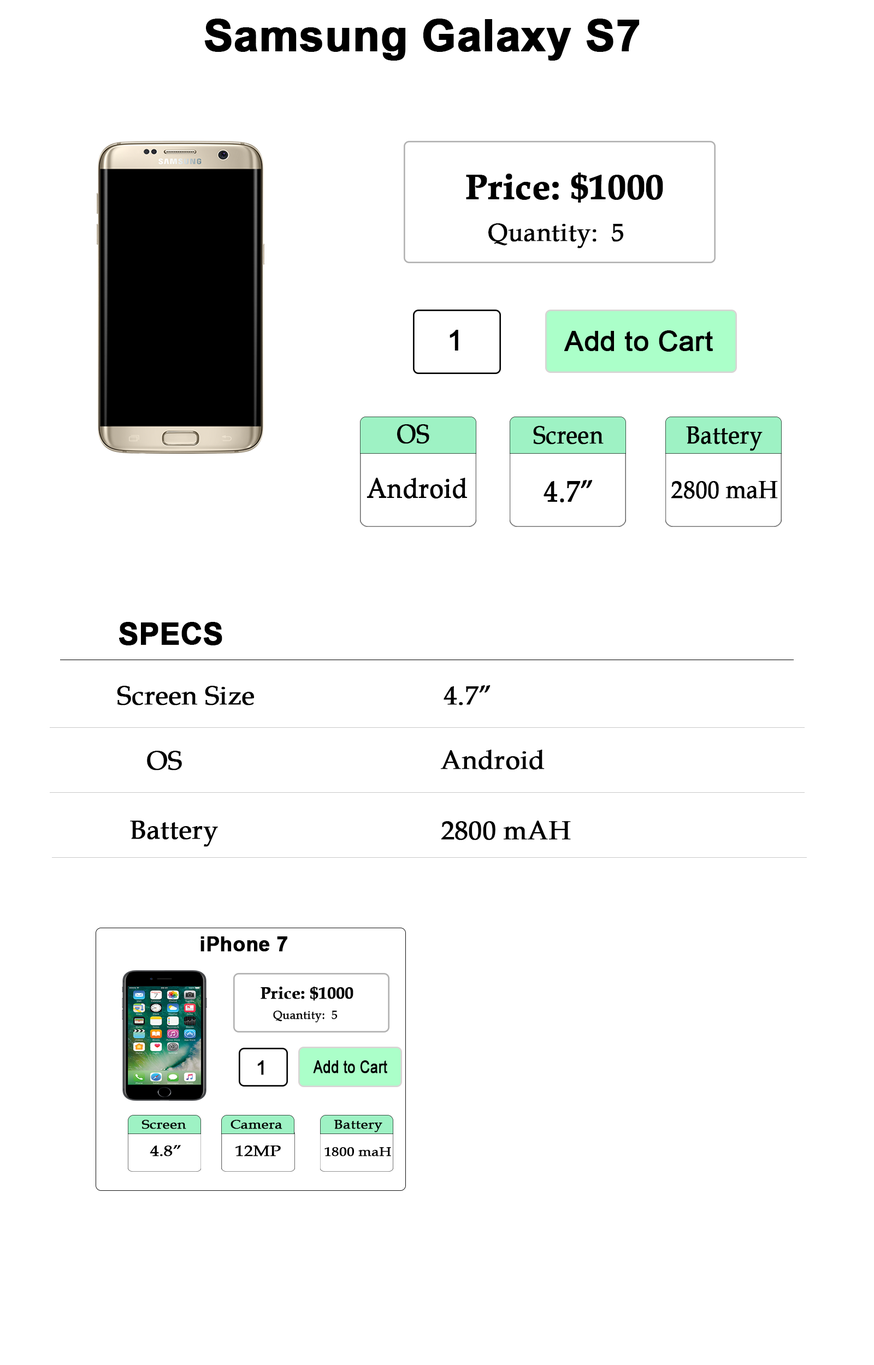
<style>
.page{position:relative;width:874px;height:1365px;background:#ffffff}
.page>*{position:absolute;margin:0}
.t1{font:43.7px "Arial-BoldMT";color:#000000;font-weight:bold}
.t2{font:35.5px "BookAntiqua-Bold";color:#000000;font-weight:bold}
.t3{font:24.6px "BookAntiqua";color:#000000;font-weight:bold}
.t4{font:28.4px "ArialMT";color:#000000;font-weight:bold}
.t5{font:27.3px "ArialMT";color:#000000;font-weight:bold}
.t6{font:26.2px "BookAntiqua";color:#000000;font-weight:bold;scale:0.92 1}
.t7{font:24.7px "BookAntiqua";color:#000000;font-weight:bold;scale:0.92 1}
.t8{font:27.4px "BookAntiqua";color:#000000;font-weight:bold;scale:0.92 1}
.t9{font:29.6px "BookAntiqua";color:#000000;font-weight:bold;scale:0.92 1}
.t10{font:30px "Arial-BoldMT";color:#000000;font-weight:bold}
.t11{font:26.2px "BookAntiqua";color:#000000;font-weight:bold}
.t12{font:20px "Arial-BoldMT";color:#000000;font-weight:bold}
.t13{font:16.7px "BookAntiqua-Bold";color:#000000;font-weight:bold}
.t14{font:12px "BookAntiqua";color:#000000;font-weight:bold}
.t15{font:19.7px "ArialMT";color:#000000;font-weight:bold}
.t16{font:17.5px "ArialMT";color:#000000;font-weight:bold;scale:0.79 1}
.t17{font:12.7px "BookAntiqua";color:#000000;font-weight:bold;scale:1.13 1}
.t18{font:15.3px "BookAntiqua";color:#000000;font-weight:bold;scale:1.13 1}
</style>
<div class="page">
<p class="t1" style="left:204px;top:19px;width:435px;height:42px">Samsung Galaxy S7</p>
<p class="t2" style="left:466px;top:173px;width:197px;height:30px">Price: $1000</p>
<p class="t3" style="left:488px;top:223px;width:135px;height:25px">Quantity:  5</p>
<p class="t4" style="left:449px;top:330px;width:9px;height:21px">1</p>
<p class="t5" style="left:564px;top:330px;width:149px;height:22px">Add to Cart</p>
<p class="t6" style="left:397px;top:424px;width:32px;height:20px">OS</p>
<p class="t7" style="left:533px;top:426px;width:70px;height:18px">Screen</p>
<p class="t7" style="left:686px;top:426px;width:76px;height:25px">Battery</p>
<p class="t8" style="left:366px;top:478px;width:101px;height:20px">Android</p>
<p class="t9" style="left:543px;top:480px;width:49px;height:22px">4.7”</p>
<p class="t7" style="left:670px;top:481px;width:107px;height:18px">2800 maH</p>
<p class="t10" style="left:119px;top:622px;width:103px;height:23px">SPECS</p>
<p class="t11" style="left:117px;top:685px;width:373px;height:20px">Screen Size                          4.7”</p>
<p class="t11" style="left:440px;top:750px;width:104px;height:20px">Android</p>
<p class="t11" style="left:147px;top:751px;width:35px;height:19px">OS</p>
<p class="t11" style="left:130px;top:821px;width:88px;height:26px">Battery</p>
<p class="t11" style="left:441px;top:821px;width:130px;height:19px">2800 mAH</p>
<p class="t12" style="left:200px;top:936px;width:87px;height:16px">iPhone 7</p>
<p class="t13" style="left:260px;top:987px;width:93px;height:14px">Price: $1000</p>
<p class="t14" style="left:273px;top:1011px;width:64px;height:12px">Quantity:  5</p>
<p class="t15" style="left:257px;top:1060px;width:7px;height:15px">1</p>
<p class="t16" style="left:313px;top:1060px;width:74px;height:13px">Add to Cart</p>
<p class="t17" style="left:141px;top:1120px;width:45px;height:9px">Screen</p>
<p class="t17" style="left:230px;top:1120px;width:52px;height:9px">Camera</p>
<p class="t17" style="left:334px;top:1120px;width:48px;height:12px">Battery</p>
<p class="t18" style="left:150px;top:1145px;width:31px;height:11px">4.8”</p>
<p class="t18" style="left:235px;top:1145px;width:46px;height:11px">12MP</p>
<p class="t17" style="left:324px;top:1147px;width:67px;height:9px">1800 maH</p>
</div>
